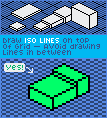
<style>
.page{position:relative;width:107px;height:118px;background:#5588e4}
.page>*{position:absolute;margin:0}
.t1{font:8px/6px "Fontix-Regular";color:#365590}
.t2{font:8px/6px "Fontix-Regular";color:#ffffff}
</style>
<div class="page">
<p class="t1" style="left:3px;top:38px;width:97px;height:17px">Draw <span class="t2">ISO LINES</span> on top <br>of Grid — Avoid drawing<br>Lines in between</p>
</div>
